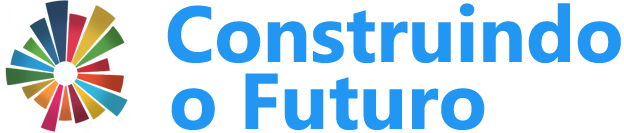
<style>
.page{position:relative;width:624px;height:133px;background:#ffffff}
.page>*{position:absolute;margin:0}
.t1{font:79.2px "MicrosoftPhagsPa-Bold";color:#2196f3}
</style>
<div class="page">
<p class="t1" style="left:167px;top:3px;width:454px;height:60px">Construindo</p>
<p class="t1" style="left:171px;top:73px;width:314px;height:57px">o Futuro</p>
</div>
